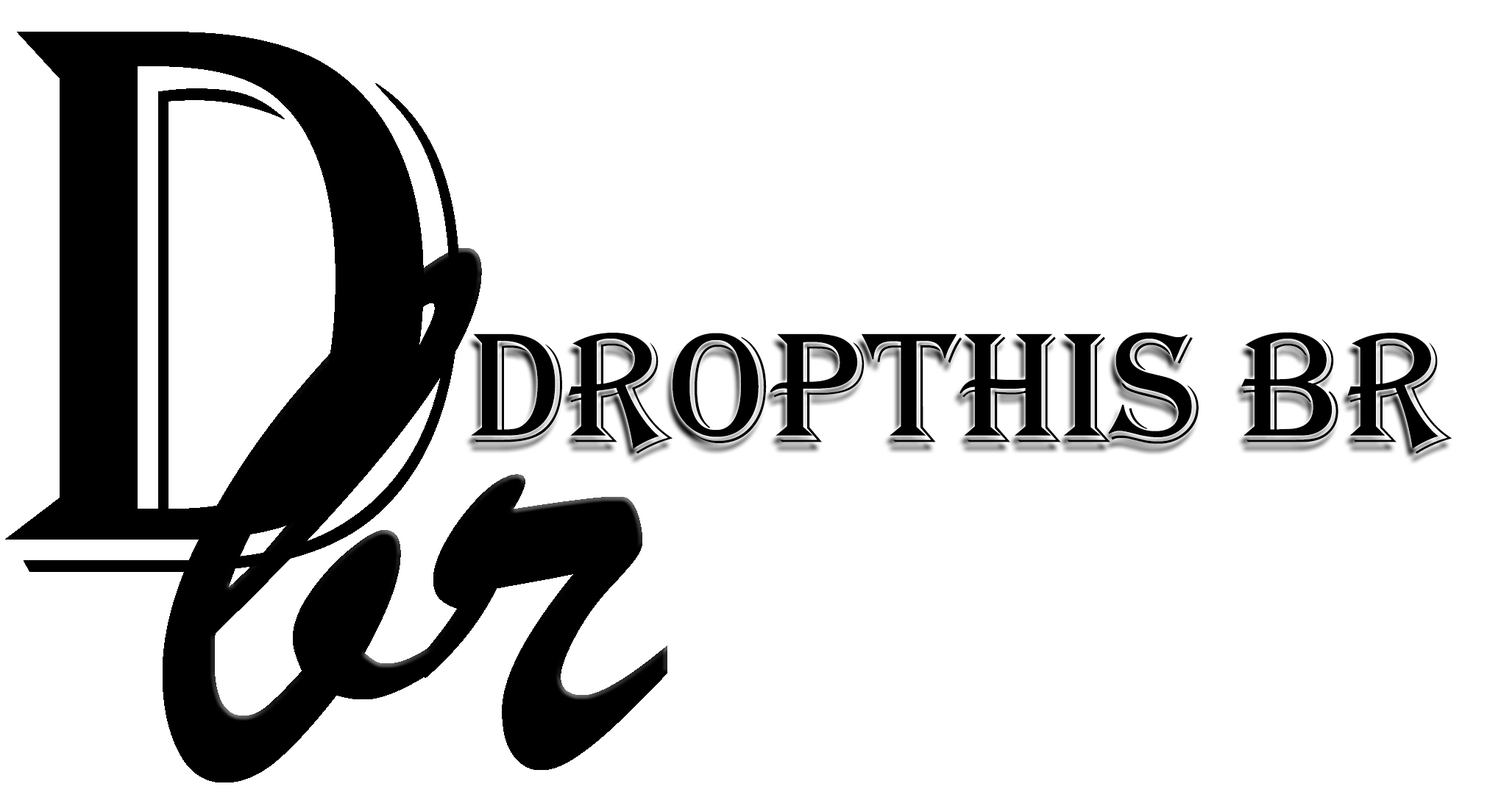
<style>
.page{position:relative;width:1501px;height:795px;background:#ffffff}
.page>*{position:absolute;margin:0}
.t1{font:809.2px "Algerian";color:#000000}
.t2{font:809.2px "BrushScriptMT";color:#000000}
.t3{font:161.8px "Algerian";color:#000000}
</style>
<div class="page">
<p class="t1" style="left:5px;top:32px;width:455px;height:540px">D</p>
<p class="t2" style="left:163px;top:248px;width:504px;height:534px">br</p>
<p class="t3" style="left:471px;top:332px;width:981px;height:122px">DROPTHIS BR</p>
</div>
